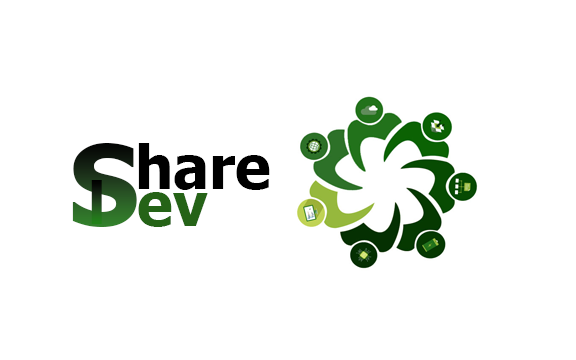
<style>
.page{position:relative;width:576px;height:360px;background:#ffffff}
.page>*{position:absolute;margin:0}
.t1{font:110px "Tahoma-Bold"}
.t2{font:60px "Tahoma-Bold";color:#000000}
.t3{font:57.7px "Tahoma-Bold"}
.t4{font:60px "Tahoma-Bold";color:#256317}
</style>
<div class="page">
<p class="t1" style="left:72px;top:143px;width:65px;height:84px">S</p>
<p class="t2" style="left:138px;top:143px;width:132px;height:47px">hare</p>
<p class="t3" style="left:91px;top:180px;width:11px;height:44px">l</p>
<p class="t4" style="left:138px;top:192px;width:70px;height:35px">ev</p>
</div>
